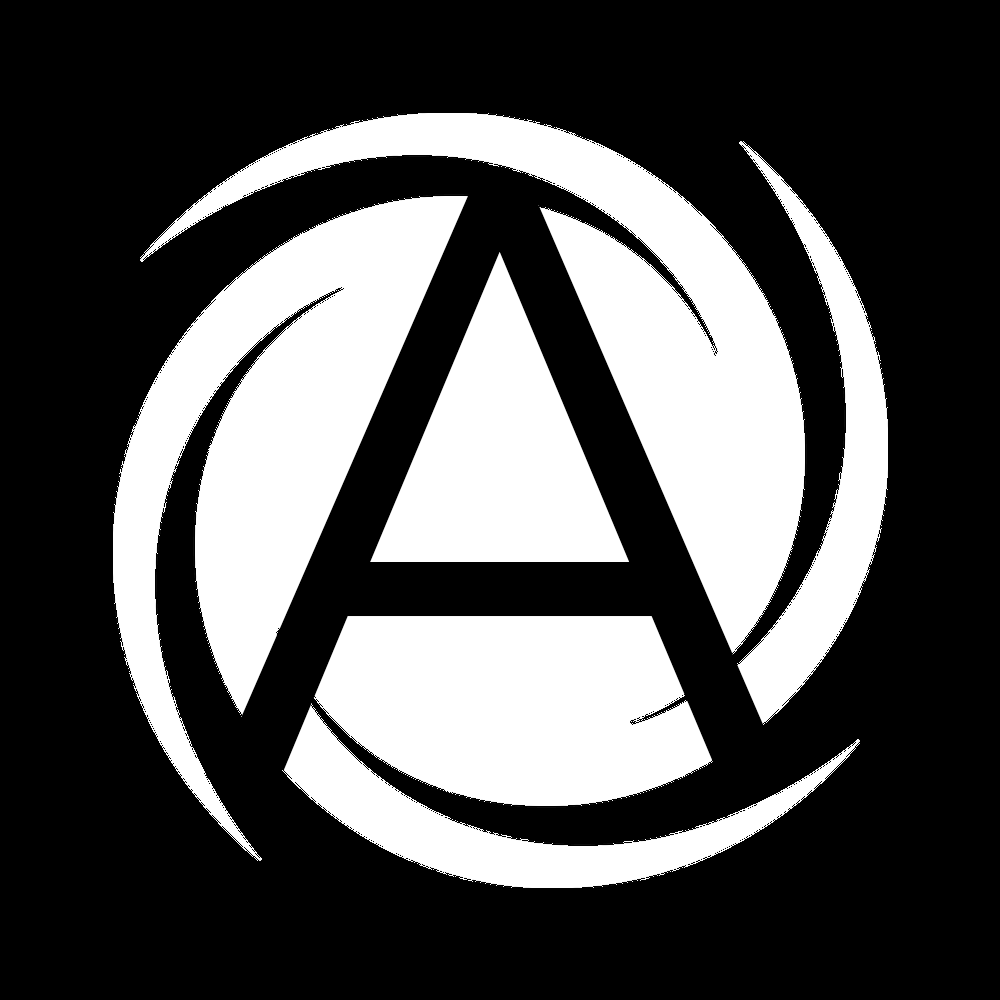
<style>
.page{position:relative;width:1000px;height:1000px;background:#000000}
.page>*{position:absolute;margin:0}
.t1{font:825px "AvenirNext-Regular";color:#000000}
</style>
<div class="page">
<p class="t1" style="left:218px;top:186px;width:565px;height:584px">A</p>
</div>
